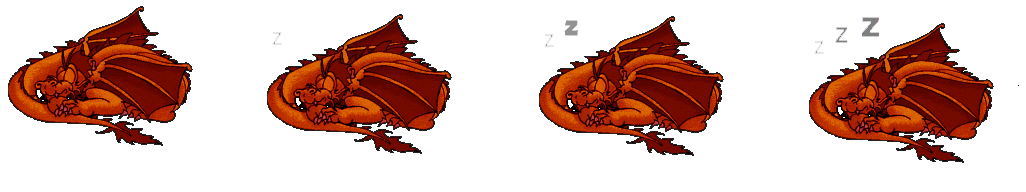
<style>
.page{position:relative;width:1026px;height:192px;background:#ffffff}
.page>*{position:absolute;margin:0}
.t1{font:30px "BerlinSansFBDemi-Bold";color:#939393}
</style>
<div class="page">
<p class="t1" style="left:564px;top:20px;width:14px;height:16px">z</p>
</div>
